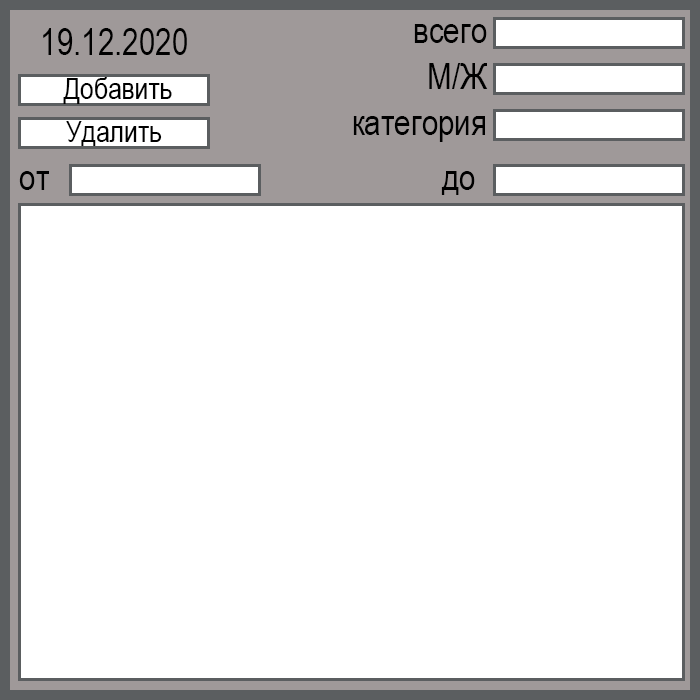
<style>
.page{position:relative;width:700px;height:700px;background:#ffffff}
.page>*{position:absolute;margin:0}
.t1{font:36px "ArialNarrow";color:#000000}
.t2{font:30px "ArialNarrow";color:#000000}
</style>
<div class="page">
<p class="t1" style="left:43px;top:28px;width:144px;height:27px">19.12.2020</p>
<p class="t1" style="left:414px;top:24px;width:73px;height:19px">всего</p>
<p class="t1" style="left:429px;top:63px;width:59px;height:26px">М/Ж</p>
<p class="t2" style="left:63px;top:77px;width:109px;height:27px">Добавить</p>
<p class="t2" style="left:66px;top:121px;width:96px;height:25px">Удалить</p>
<p class="t1" style="left:353px;top:116px;width:132px;height:26px">категория</p>
<p class="t1" style="left:19px;top:171px;width:30px;height:19px">от</p>
<p class="t1" style="left:441px;top:171px;width:34px;height:24px">до</p>
</div>
